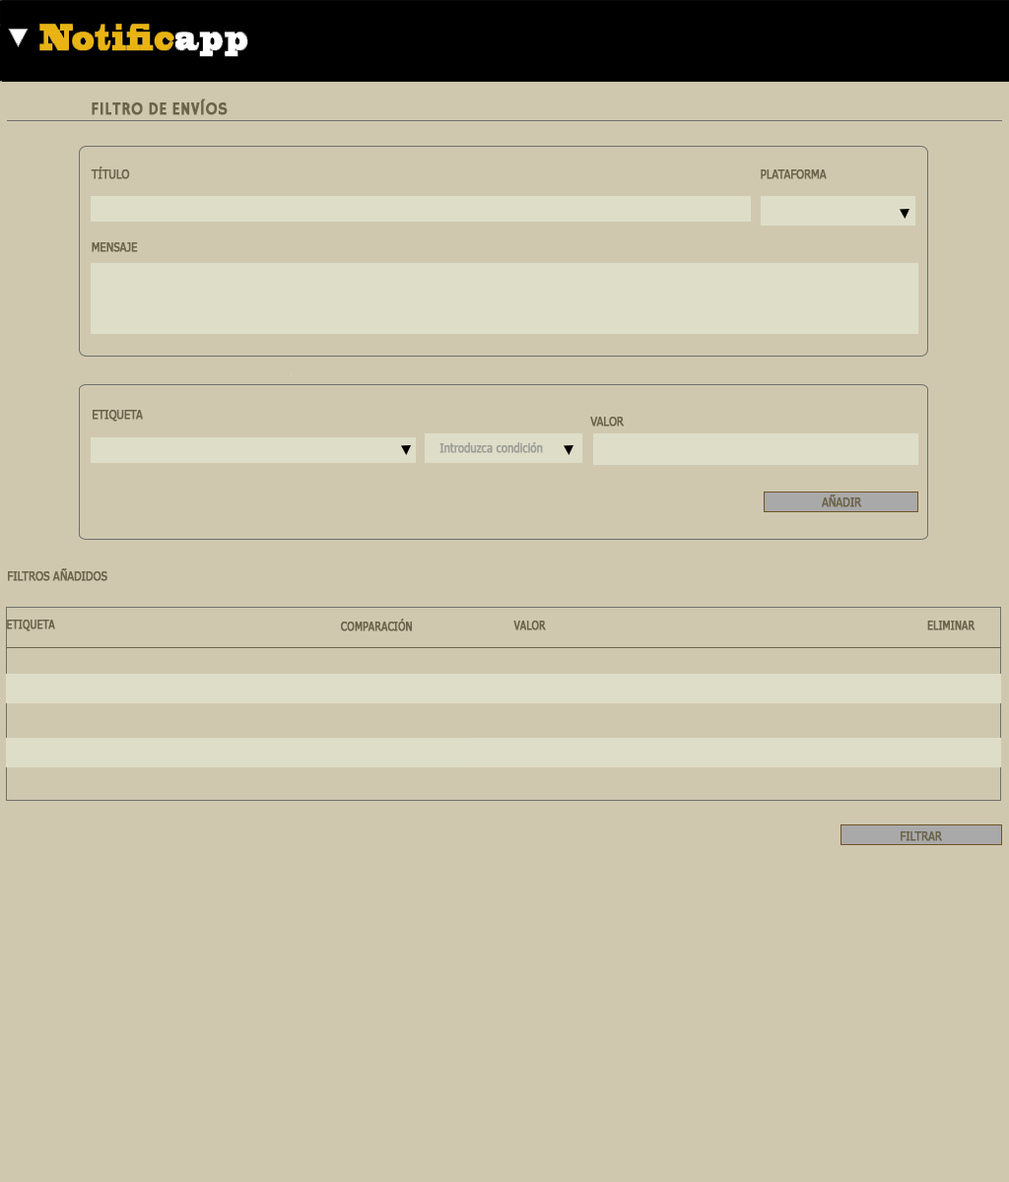
<style>
.page{position:relative;width:1009px;height:1182px;background:#cfc8af}
.page>*{position:absolute;margin:0}
.t1{font:17.7px "HammersmithOne";color:#6c644a;font-weight:bold;scale:0.9 1}
.t2{font:11.8px "Tahoma";color:#6c644a;font-weight:bold;scale:0.9 1}
.t3{font:11.8px "Tahoma";color:#9f9f99;font-weight:bold;scale:0.9 1}
.t4{font:11.8px "Tahoma";color:#6c644a;font-weight:bold;scale:0.86 1}
</style>
<div class="page">
<p class="t1" style="left:92px;top:99px;width:136px;height:16px">FILTRO DE ENVÍOS</p>
<p class="t2" style="left:91px;top:166px;width:39px;height:13px">TÍTULO</p>
<p class="t2" style="left:760px;top:169px;width:66px;height:10px">PLATAFORMA</p>
<p class="t2" style="left:92px;top:242px;width:46px;height:10px">MENSAJE</p>
<p class="t2" style="left:93px;top:410px;width:50px;height:12px">ETIQUETA</p>
<p class="t2" style="left:590px;top:417px;width:34px;height:10px">VALOR</p>
<p class="t3" style="left:439px;top:442px;width:104px;height:11px">Introduzca condición</p>
<p class="t2" style="left:822px;top:495px;width:40px;height:12px">AÑADIR</p>
<p class="t2" style="left:8px;top:568px;width:99px;height:13px">FILTROS AÑADIDOS</p>
<p class="t4" style="left:7px;top:620px;width:48px;height:11px">ETIQUETA</p>
<p class="t4" style="left:341px;top:619px;width:71px;height:12px">COMPARACIÓN</p>
<p class="t4" style="left:513px;top:621px;width:33px;height:9px">VALOR</p>
<p class="t4" style="left:927px;top:621px;width:48px;height:9px">ELIMINAR</p>
<p class="t2" style="left:900px;top:831px;width:42px;height:10px">FILTRAR</p>
</div>
